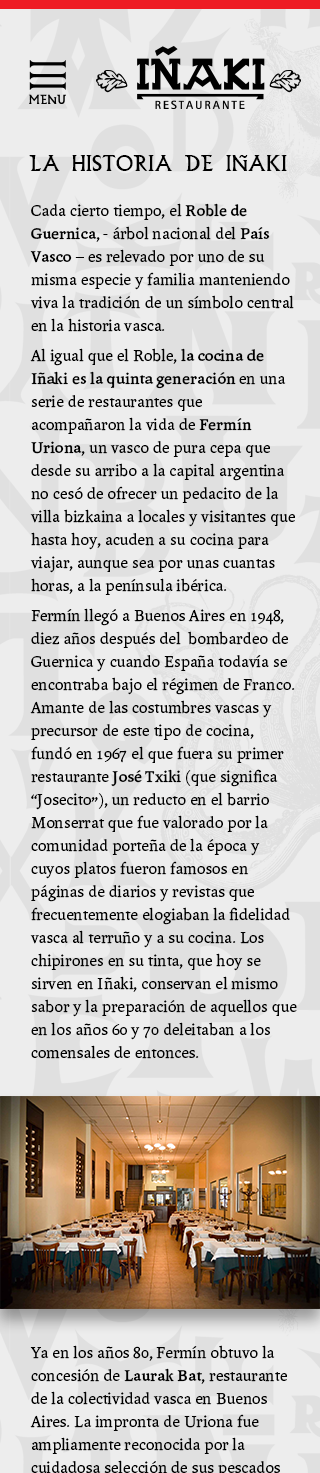
<style>
.page{position:relative;width:320px;height:1473px;background:#ededed}
.page>*{position:absolute;margin:0}
.t1{font:23px "Bilbao";color:#000000}
.t2{font:17px/23px "AndralisNDOsF";color:#000000}
.t3{font:17px/23px "AndralisNDOsF-Bold";color:#000000}
</style>
<div class="page">
<p class="t1" style="left:29px;top:155px;width:258px;height:16px">LA HISTORIA DE IÑAKI</p>
<p class="t2" style="left:30px;top:203px;width:267px;height:856px">Cada cierto tiempo, el <span class="t3">Roble de Guernica</span>, - árbol nacional del <span class="t3">País Vasco</span> – es relevado por uno de su misma especie y familia manteniendo viva la tradición de un símbolo central en la historia vasca.<br>Al igual que el Roble, <span class="t3">la cocina de Iñaki es la quinta generación </span>en una serie de restaurantes que acompañaron la vida de <span class="t3">Fermín Uriona</span>, un vasco de pura cepa que desde su arribo a la capital argentina no cesó de ofrecer un pedacito de la villa bizkaina a locales y visitantes que hasta hoy, acuden a su cocina para viajar, aunque sea por unas cuantas horas, a la península ibérica.<br>Fermín llegó a Buenos Aires en 1948, diez años después del  bombardeo de Guernica y cuando España todavía se encontraba bajo el régimen de Franco. Amante de las costumbres vascas y precursor de este tipo de cocina, fundó en 1967 el que fuera su primer restaurante<span class="t3"> José Txiki </span>(que significa  “Josecito”), un reducto en el barrio Monserrat que fue valorado por la comunidad porteña de la época y cuyos platos fueron famosos en páginas de diarios y revistas que frecuentemente elogiaban la fidelidad vasca al terruño y a su cocina. Los chipirones en su tinta, que hoy se sirven en Iñaki, conservan el mismo sabor y la preparación de aquellos que en los años 60 y 70 deleitaban a los comensales de entonces.</p>
</div>
